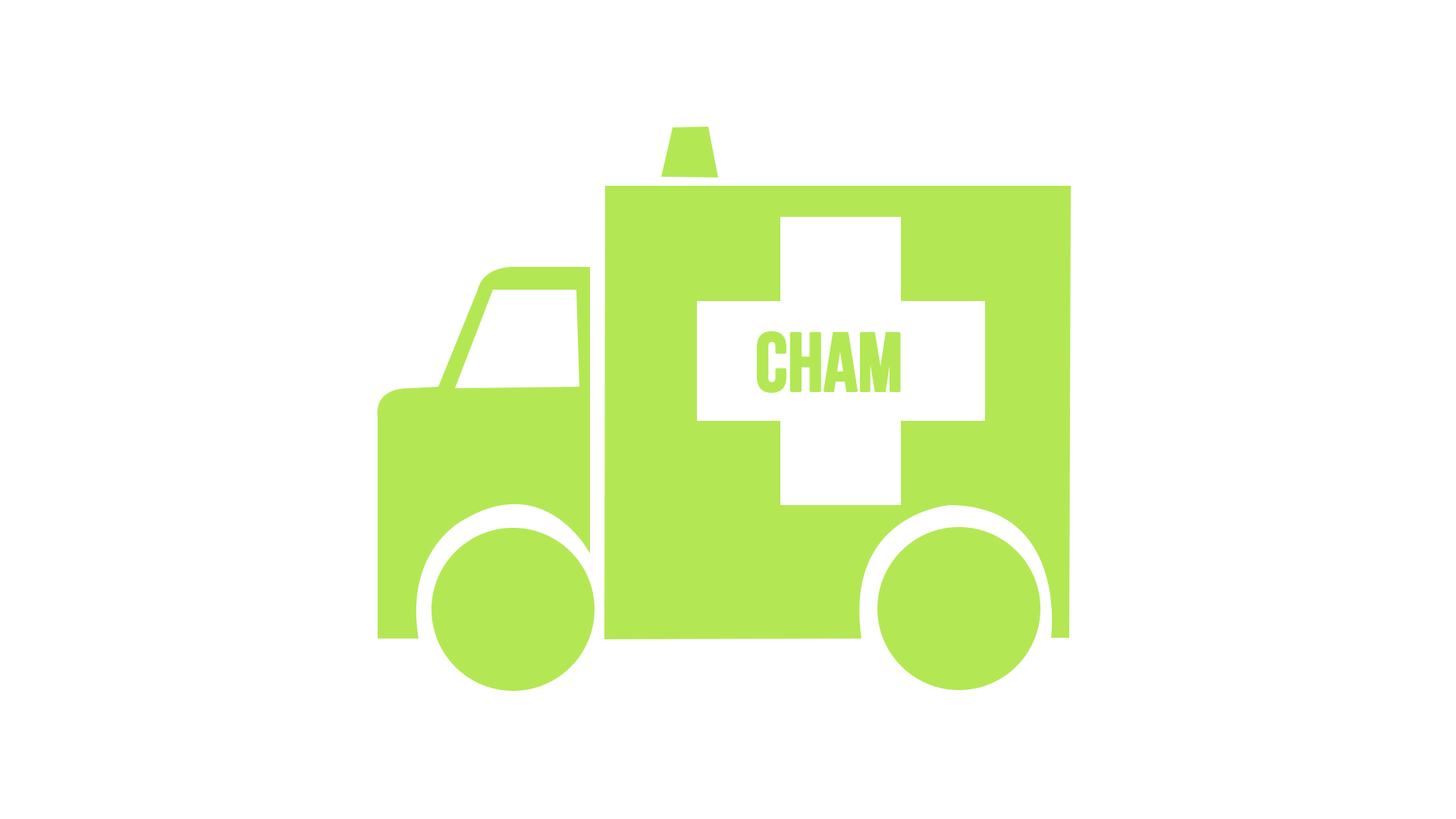
<style>
.page{position:relative;width:1456px;height:819px;background:#ffffff}
.page>*{position:absolute;margin:0}
.t1{font:82.6px "BebasNeueBold";letter-spacing:-0.02em;color:#b3e854;font-weight:bold}
</style>
<div class="page">
<p class="t1" style="left:757px;top:331px;width:144px;height:62px">CHAM</p>
</div>
